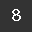
<style>
.page{position:relative;width:32px;height:32px;background:#333333}
.page>*{position:absolute;margin:0}
.t1{font:17.8px "MyriadPro-Regular";color:#ffffff;scale:1.12 1}
</style>
<div class="page">
<p class="t1" style="left:12px;top:9px;width:9px;height:12px">8</p>
</div>
